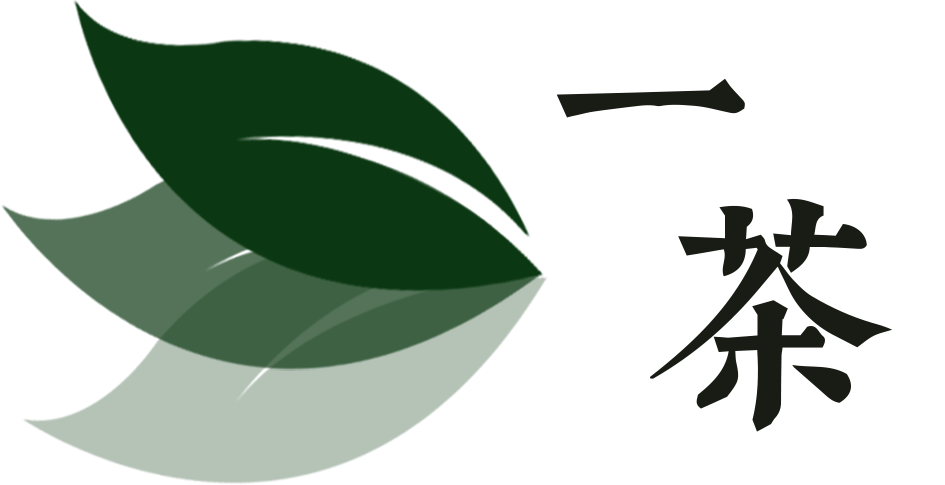
<style>
.page{position:relative;width:945px;height:485px;background:#ffffff}
.page>*{position:absolute;margin:0}
.t1{font:200px "WenYue-GuDianMingChaoTi-NC-W5";color:#191c15}
.t2{font:250px "WenYue-GuDianMingChaoTi-NC-W5";color:#191c15}
</style>
<div class="page">
<p class="t1" style="left:556px;top:78px;width:189px;height:40px">一</p>
<p class="t2" style="left:650px;top:198px;width:242px;height:234px">茶</p>
</div>
